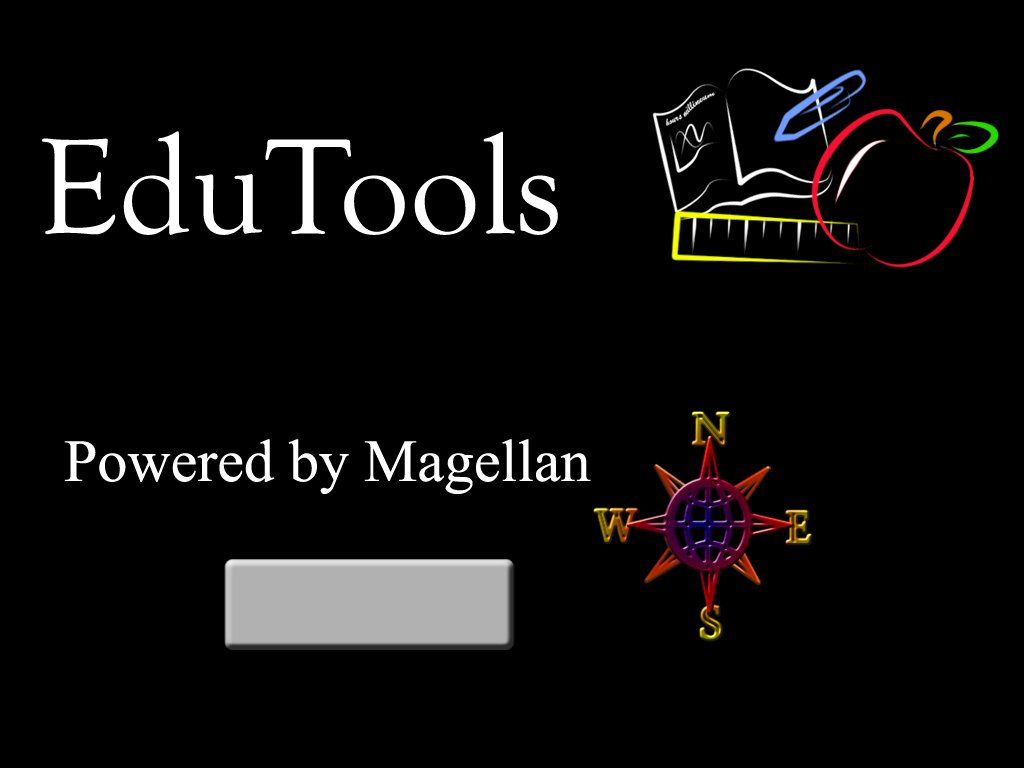
<style>
.page{position:relative;width:1024px;height:768px;background:#000000}
.page>*{position:absolute;margin:0}
.t1{font:140px "GoudyOldStyleT-Regular";color:#ffffff}
.t2{font:60px "TimesNewRomanPSMT";color:#ffffff}
</style>
<div class="page">
<p class="t1" style="left:42px;top:131px;width:516px;height:104px">EduTools</p>
<p class="t2" style="left:64px;top:439px;width:527px;height:55px">Powered by Magellan</p>
</div>
